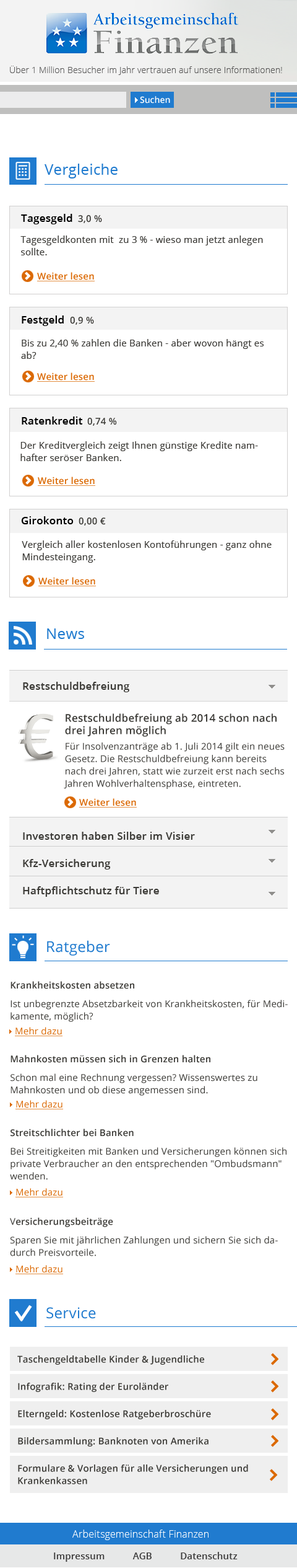
<style>
.page{position:relative;width:297px;height:1568px;background:#ffffff}
.page>*{position:absolute;margin:0}
.t1{font:8.7px "OpenSans-Light";letter-spacing:0.015em;color:#585858}
.t2{font:8.7px "OpenSans-Semibold";color:#ffffff}
.t3{font:14.9px "OpenSans";letter-spacing:0.015em;color:#207bcf}
.t4{font:10.5px "OpenSans-Semibold";letter-spacing:0.015em;color:#000000}
.t5{font:9.3px "OpenSans-Semibold";letter-spacing:0.015em;color:#3c3b37}
.t6{font:9.3px/12.4px "OpenSans";letter-spacing:0.015em;color:#3c3b37}
.t7{font:9.3px "OpenSans-Semibold";letter-spacing:0.015em;color:#db6903;text-decoration:underline}
.t8{font:10.5px/13.6px "OpenSans-Semibold";letter-spacing:0.015em;color:#3c3b37}
.t9{font:10.5px/12.4px "OpenSans-Semibold";letter-spacing:0.015em;color:#3c3b37}
.t10{font:9.3px/15.5px "OpenSans";letter-spacing:0.015em;color:#3c3b37}
.t11{font:9.3px/12.4px "OpenSans-Semibold";letter-spacing:0.015em;color:#3c3b37}
.t12{font:9.3px "OpenSans";letter-spacing:0.015em;color:#db6903;text-decoration:underline}
.t13{font:9.3px/6.2px "OpenSans-Semibold";letter-spacing:0.015em;color:#3c3b37}
.t14{font:9.3px/27.3px "OpenSans-Semibold";letter-spacing:0.015em;color:#3c3b37}
.t15{font:9.9px "OpenSans-Light";letter-spacing:0.015em;color:#ffffff}
.t16{font:9.3px "OpenSans-Semibold";letter-spacing:0.015em;color:#3e3d3d}
</style>
<div class="page">
<p class="t1" style="left:10px;top:66px;width:273px;height:9px">Über 1 Million Besucher im Jahr vertrauen auf unsere Informationen!</p>
<p class="t2" style="left:140px;top:96px;width:30px;height:8px">Suchen</p>
<p class="t3" style="left:45px;top:164px;width:73px;height:14px">Vergleiche</p>
<p class="t4" style="left:21px;top:214px;width:52px;height:10px">Tagesgeld</p>
<p class="t5" style="left:78px;top:215px;width:24px;height:8px">3,0 %</p>
<p class="t6" style="left:20px;top:236px;width:243px;height:19px">Tagesgeldkonten mit  zu 3 % - wieso man jetzt anlegen sollte.</p>
<p class="t7" style="left:37px;top:272px;width:58px;height:9px">Weiter lesen</p>
<p class="t4" style="left:22px;top:315px;width:42px;height:11px">Festgeld</p>
<p class="t5" style="left:70px;top:317px;width:24px;height:8px">0,9 %</p>
<p class="t6" style="left:21px;top:339px;width:244px;height:20px">Bis zu 2,40 % zahlen die Banken - aber wovon hängt es ab?</p>
<p class="t7" style="left:37px;top:372px;width:58px;height:10px">Weiter lesen</p>
<p class="t4" style="left:22px;top:416px;width:61px;height:9px">Ratenkredit</p>
<p class="t5" style="left:87px;top:418px;width:30px;height:8px">0,74 %</p>
<p class="t6" style="left:20px;top:441px;width:238px;height:20px">Der Kreditvergleich zeigt Ihnen günstige Kredite namhafter seröser Banken.</p>
<p class="t7" style="left:38px;top:477px;width:57px;height:9px">Weiter lesen</p>
<p class="t4" style="left:21px;top:516px;width:53px;height:8px">Girokonto</p>
<p class="t5" style="left:79px;top:518px;width:27px;height:8px">0,00 €</p>
<p class="t6" style="left:22px;top:540px;width:250px;height:23px">Vergleich aller kostenlosen Kontoführungen - ganz ohne Mindesteingang.</p>
<p class="t7" style="left:38px;top:577px;width:58px;height:9px">Weiter lesen</p>
<p class="t3" style="left:47px;top:628px;width:37px;height:11px">News</p>
<p class="t8" style="left:23px;top:682px;width:172px;height:215px">Restschuldbefreiung <br><br><br><br><br><br><br><br><br><br><br>Investoren haben Silber im Visier <br><br>Kfz-Versicherung<br><br>Haftpflichtschutz für Tiere</p>
<p class="t6" style="left:64px;top:713px;width:221px;height:76px"><span class="t9">Restschuldbefreiung ab 2014 schon nach drei Jahren möglich <br></span><span class="t10">Für I</span>nsolvenzanträge ab 1. Juli 2014 gilt ein neues Gesetz. Die Restschuldbefreiung kann bereits nach drei Jahren, statt wie zurzeit erst nach sechs Jahren Wohlverhaltensphase, eintreten.</p>
<p class="t7" style="left:79px;top:798px;width:58px;height:10px">Weiter lesen</p>
<p class="t3" style="left:47px;top:940px;width:63px;height:16px">Ratgeber</p>
<p class="t6" style="left:11px;top:981px;width:277px;height:41px"><span class="t11">Krankheitskosten absetzen<br>  <br></span>Ist unbegrenzte Absetzbarkeit von Krankheitskosten, für Medikamente, möglich?</p>
<p class="t12" style="left:15px;top:1027px;width:48px;height:9px">Mehr dazu</p>
<p class="t6" style="left:11px;top:1055px;width:247px;height:41px"><span class="t11">Mahnkosten müssen sich in Grenzen hal</span><span class="t13">ten<br>  <br></span>Schon mal eine Rechnung vergessen? Wissenswertes zu Mahnkosten und ob diese angemessen sind.</p>
<p class="t12" style="left:15px;top:1100px;width:48px;height:9px">Mehr dazu</p>
<p class="t6" style="left:10px;top:1129px;width:277px;height:51px"><span class="t11">Streitschlichter bei Banken <br>  <br></span>Bei Streitigkeiten mit Banken und Versicherungen können sich private Verbraucher an den entsprechenden "Ombudsmann" wenden.</p>
<p class="t12" style="left:15px;top:1188px;width:48px;height:9px">Mehr dazu</p>
<p class="t6" style="left:10px;top:1217px;width:268px;height:39px">V<span class="t11">ersicherungsbeiträg</span><span class="t13">e <br>  <br></span>Sparen Sie mit jährlichen Zahlungen und sichern Sie sich dadurch Preisvorteile.</p>
<p class="t12" style="left:15px;top:1265px;width:48px;height:9px">Mehr dazu</p>
<p class="t3" style="left:46px;top:1307px;width:50px;height:12px">Service</p>
<p class="t14" style="left:17px;top:1355px;width:232px;height:129px">Taschengeldtabelle Kinder &amp; Jugendliche <br>Infografik: Rating der Euroländer <br>Elterngeld: Kostenlose Ratgeberbroschüre <br>Bildersammlung: Banknoten von Amerika <br>Formulare &amp; Vorlagen f<span class="t11">ür alle Versicherungen und<br>Krankenkassen</span></p>
<p class="t15" style="left:73px;top:1530px;width:136px;height:10px">Arbeitsgemeinschaft Finanzen</p>
<p class="t16" style="left:54px;top:1552px;width:184px;height:10px">Impressum           AGB           Datenschutz</p>
</div>
